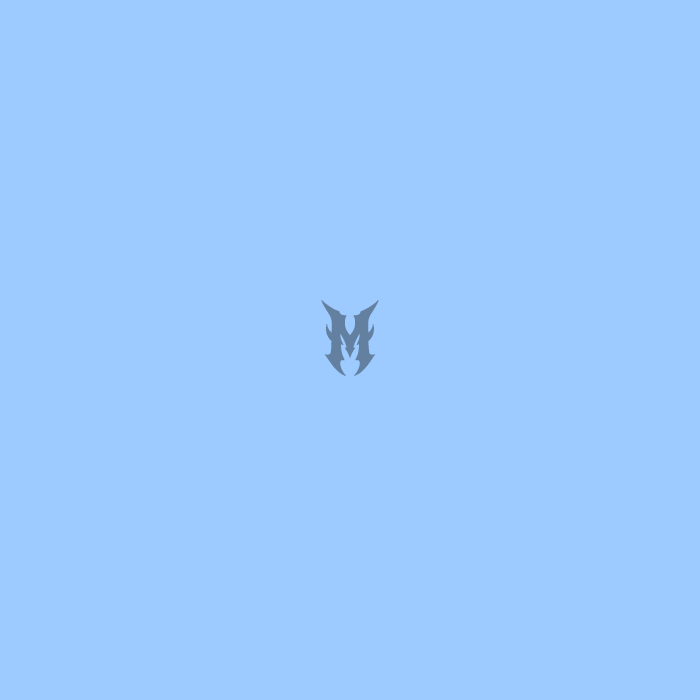
<style>
.page{position:relative;width:700px;height:700px;background:#9dcbff}
.page>*{position:absolute;margin:0}
.t1{font:70.6px "ZeusBorne-Regular";letter-spacing:0.1em;color:#6380a1}
</style>
<div class="page">
<p class="t1" style="left:321px;top:300px;width:58px;height:76px">m</p>
</div>
